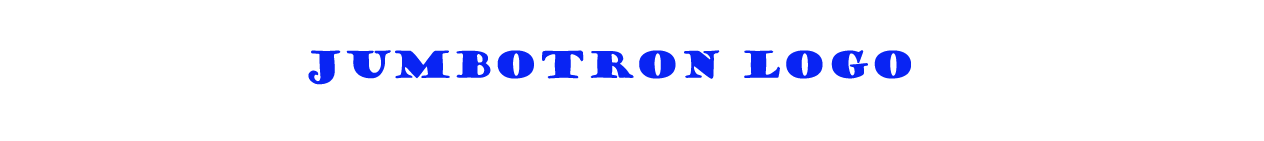
<style>
.page{position:relative;width:1264px;height:141px;background:#ffffff}
.page>*{position:absolute;margin:0}
.t1{font:36px "GoudyStout";color:#0924f3}
</style>
<div class="page">
<p class="t1" style="left:308px;top:50px;width:603px;height:35px">JumboTroN LOGO</p>
</div>
